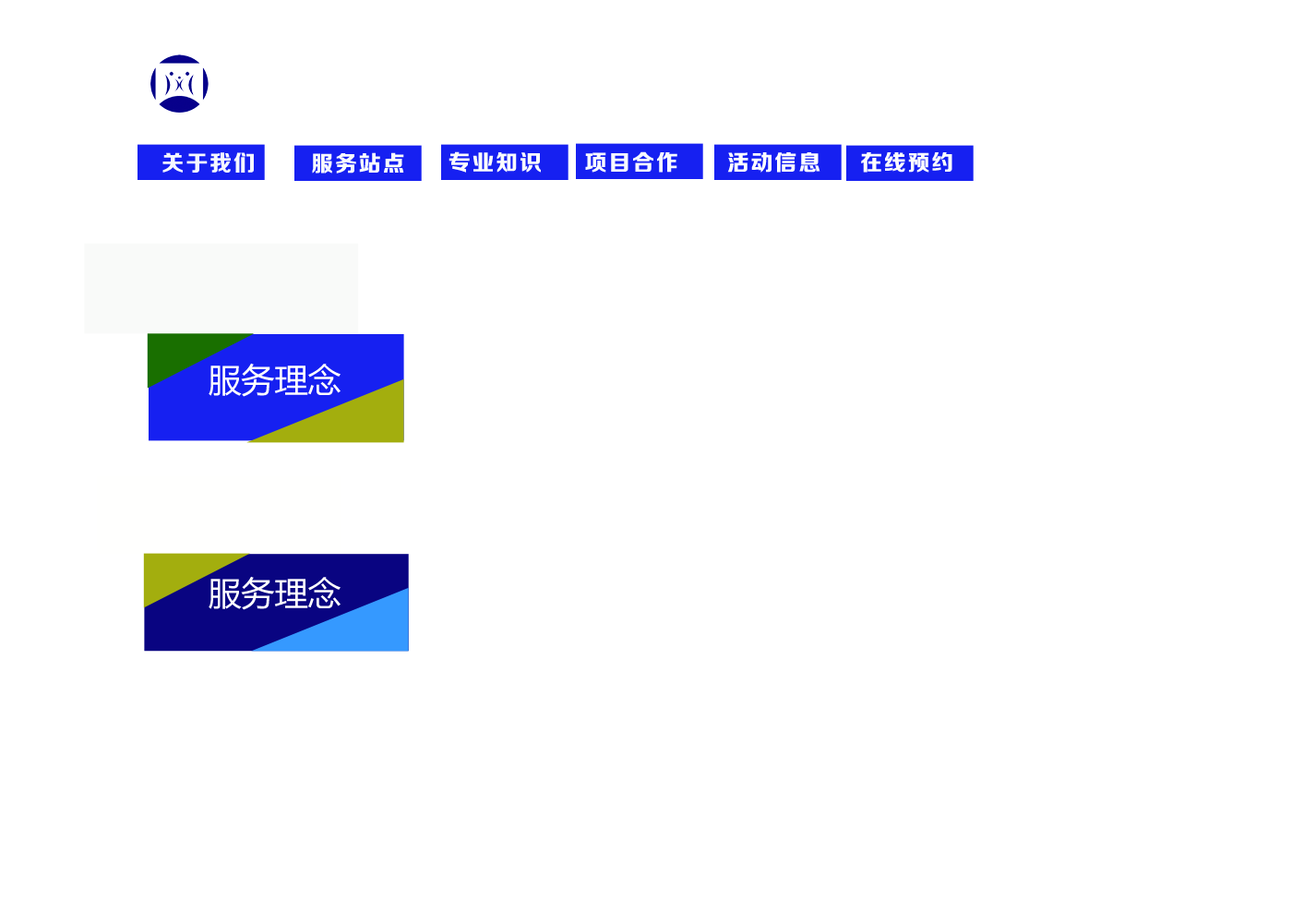
<style>
.page{position:relative;width:1292px;height:923px;background:#ffffff}
.page>*{position:absolute;margin:0}
.t1{font:22.2px "FZZDHJW--GB1-0";letter-spacing:0.075em;color:#f5f7ff}
.t2{font:22.2px "FZZDHJW--GB1-0";letter-spacing:0.075em;color:#fafcfd}
.t3{font:22.2px "FZZDHJW--GB1-0";letter-spacing:0.075em;color:#f7f9ff}
.t4{font:22.2px "FZZDHJW--GB1-0";letter-spacing:0.075em;color:#fdfdff}
.t5{font:22.2px "FZZDHJW--GB1-0";letter-spacing:0.075em;color:#fcfdfd}
.t6{font:33.2px "MicrosoftYaHei";color:#fffffe}
</style>
<div class="page">
<p class="t1" style="left:162px;top:152px;width:92px;height:21px">关于我们</p>
<p class="t2" style="left:312px;top:152px;width:92px;height:22px">服务站点</p>
<p class="t2" style="left:449px;top:151px;width:92px;height:22px">专业知识</p>
<p class="t3" style="left:585px;top:151px;width:92px;height:22px">项目合作</p>
<p class="t4" style="left:727px;top:152px;width:93px;height:21px">活动信息</p>
<p class="t5" style="left:861px;top:152px;width:91px;height:21px">在线预约</p>
<p class="t6" style="left:209px;top:363px;width:132px;height:34px">服务理念</p>
<p class="t6" style="left:209px;top:576px;width:132px;height:34px">服务理念</p>
</div>
